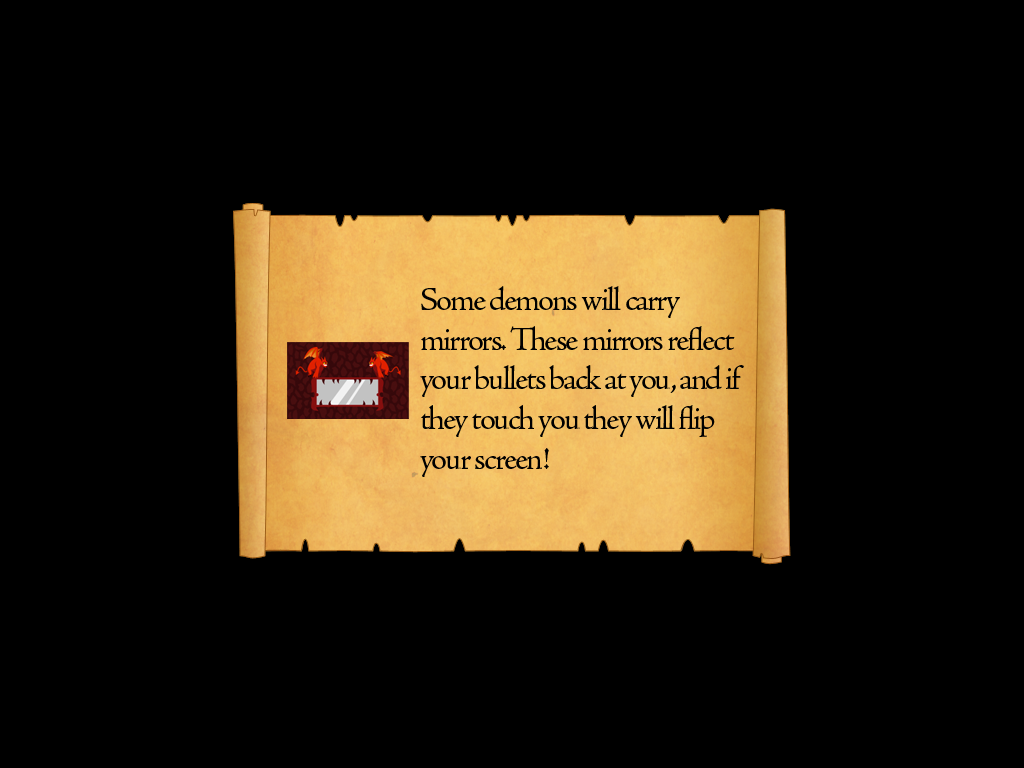
<style>
.page{position:relative;width:1024px;height:768px;background:#000000}
.page>*{position:absolute;margin:0}
.t1{font:33px "AJensonPro-Regular";letter-spacing:-0.06em;color:#000000}
</style>
<div class="page">
<p class="t1" style="left:420px;top:286px;width:324px;height:191px">Some demons will carry mirrors. These mirrors reflect your bullets back at you, and if they touch you they will flip your screen!</p>
</div>
